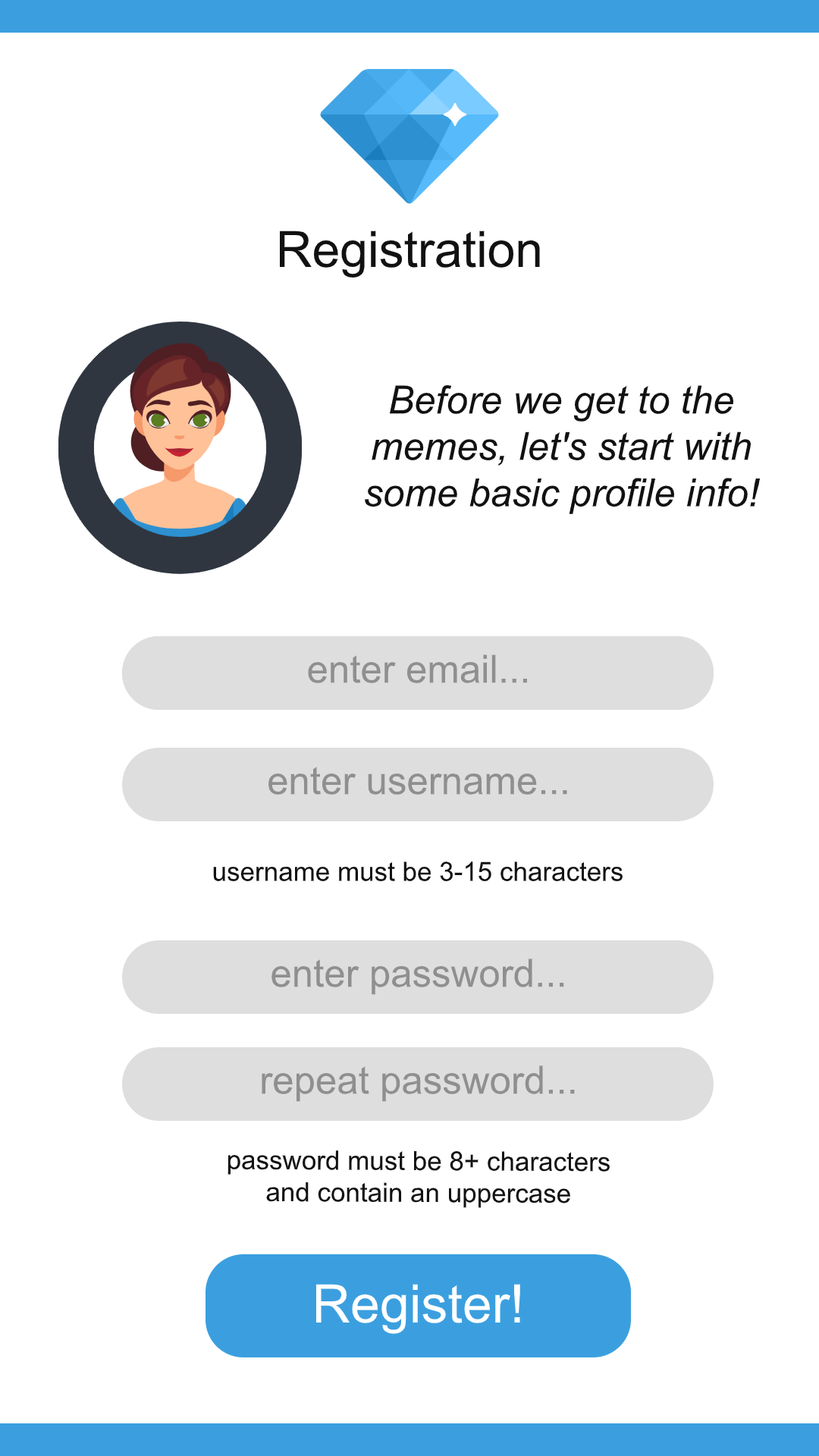
<style>
.page{position:relative;width:819px;height:1456px;background:#ffffff}
.page>*{position:absolute;margin:0}
.t1{font:50px "ArialMT";color:#111111}
.t2{font:38.7px "Arial-ItalicMT";color:#111111}
.t3{font:38.7px "ArialMT";color:#8f8f8f}
.t4{font:26.5px "ArialMT";color:#111111}
.t5{font:53.1px "ArialMT";color:#ffffff}
</style>
<div class="page">
<p class="t1" style="left:280px;top:231px;width:260px;height:47px">Registration</p>
<p class="t2" style="left:365px;top:385px;width:396px;height:129px;text-align:center">Before we get to the memes, let's start with some basic profile info!</p>
<p class="t3" style="left:308px;top:654px;width:219px;height:29px">enter email...</p>
<p class="t3" style="left:268px;top:767px;width:299px;height:28px">enter username...</p>
<p class="t4" style="left:213px;top:861px;width:410px;height:20px">username must be 3-15 characters</p>
<p class="t3" style="left:271px;top:959px;width:293px;height:36px">enter password...</p>
<p class="t3" style="left:262px;top:1065px;width:313px;height:37px">repeat password...</p>
<p class="t4" style="left:227px;top:1150px;width:383px;height:58px;text-align:center">password must be 8+ characters and contain an uppercase</p>
<p class="t5" style="left:315px;top:1284px;width:205px;height:50px">Register!</p>
</div>
